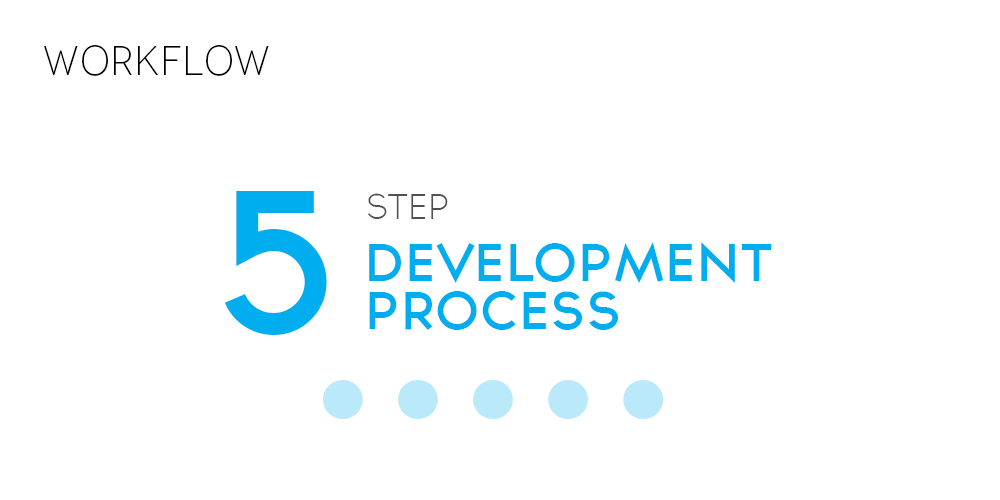
<style>
.page{position:relative;width:1000px;height:500px;background:#ffffff}
.page>*{position:absolute;margin:0}
.t1{font:41.3px "Novecento-Light";letter-spacing:0.02em;color:#000000}
.t2{font:182.4px "TYPOGRAPHPRO-SemiBold";letter-spacing:0.02em;color:#00adee}
.t3{font:47.9px/61.8px "TYPOGRAPHPRO-SemiBold";letter-spacing:0.02em;color:#00adee}
.t4{font:31.9px "TYPOGRAPHPRO-Light";letter-spacing:0.02em;color:#515151}
.t5{font:47.9px/48.2px "TYPOGRAPHPRO-SemiBold";letter-spacing:0.02em;color:#00adee}
</style>
<div class="page">
<p class="t1" style="left:44px;top:45px;width:225px;height:31px">WORKFLOW</p>
<p class="t2" style="left:224px;top:191px;width:103px;height:144px">5</p>
<p class="t3" style="left:368px;top:193px;width:404px;height:137px"><span class="t4">STEP<br></span>DEVELOPMENT<br><span class="t5">PROCESS</span></p>
</div>
